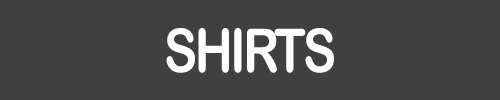
<style>
.page{position:relative;width:500px;height:100px;background:#404040}
.page>*{position:absolute;margin:0}
.t1{font:60.5px "ArialRoundedMTBold";letter-spacing:-0.055em;color:#ffffff;scale:0.83 1}
</style>
<div class="page">
<p class="t1" style="left:166px;top:28px;width:168px;height:45px">SHIRTS</p>
</div>
